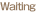
<style>
.page{position:relative;width:38px;height:15px;background:#ffffff}
.page>*{position:absolute;margin:0}
.t1{font:10px "GothicMB101Pro-DeBold";letter-spacing:-0.08em;color:#8b6e51}
</style>
<div class="page">
<p class="t1" style="left:0px;top:2px;width:36px;height:10px;opacity:0.9">Waiting</p>
</div>
